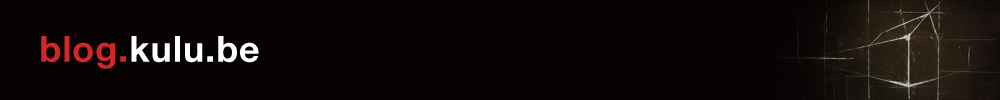
<style>
.page{position:relative;width:1000px;height:100px;background:#070303}
.page>*{position:absolute;margin:0}
.t1{font:36px "HelveticaNeueLTCom-Bd";letter-spacing:0.025em;color:#ffffff}
.t2{font:36px "HelveticaNeueLTCom-Bd";letter-spacing:0.025em;color:#d12727}
</style>
<div class="page">
<p class="t1" style="left:41px;top:36px;width:218px;height:33px"><span class="t2">blog.</span>kulu.be</p>
</div>
